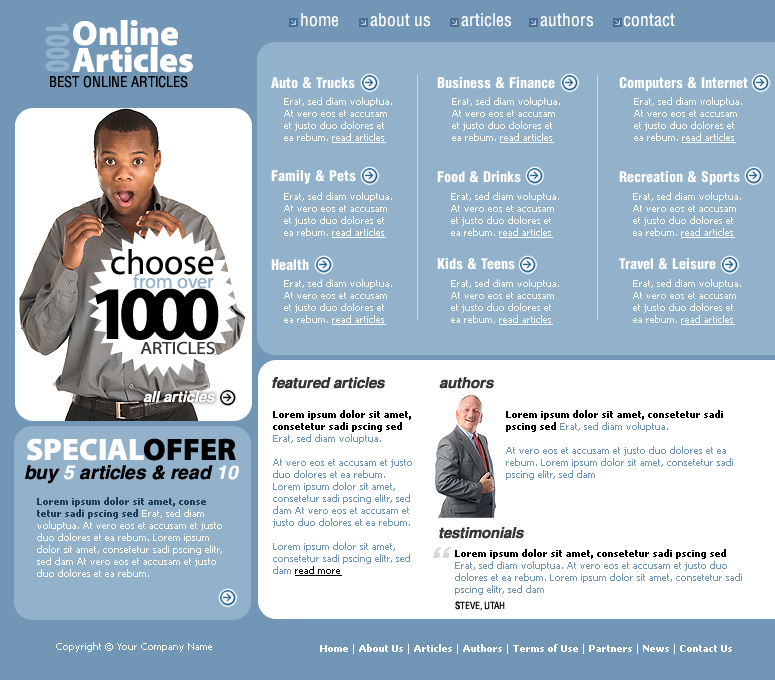
<style>
.page{position:relative;width:775px;height:680px;background:#91b2ca}
.page>*{position:absolute;margin:0}
.t1{font:18px "HeliosCond";color:#ffffff}
.t2{font:35px "MyriadPro-Black";color:#91b2ca;scale:0.63 1}
.t3{font:35px/26.8px "MyriadPro-Black";color:#ffffff}
.t4{font:15px "HeliosCond";color:#000000;text-transform:uppercase}
.t5{font:15px "HeliosCondBlack";color:#ffffff}
.t6{font:10px "Tahoma";color:#ffffff}
.t7{font:10px "Tahoma";color:#ffffff;text-decoration:underline}
.t8{font:35px "MyriadPro-Regular";color:#000000}
.t9{font:20px "MyriadPro-Regular";color:#91b2ca}
.t10{font:76px "MyriadPro-Bold";letter-spacing:-0.16em;color:#000000}
.t11{font:17.7px "MyriadPro-Regular";color:#353535;text-transform:uppercase;scale:1.08 1}
.t12{font:15px "Helvetica-BoldOblique";color:#353535}
.t13{font:15px "Helvetica-BoldOblique";color:#ffffff}
.t14{font:10px "Tahoma";color:#7296b6}
.t15{font:10px "Tahoma-Bold";color:#000000}
.t16{font:10px "Tahoma";color:#000000;text-decoration:underline}
.t17{font:19px "Helvetica-BoldOblique";color:#000000}
.t18{font:19px "Helvetica-BoldOblique";color:#ffffff}
.t19{font:40px "Helvetica-BoldOblique";color:#d7d7d7}
.t20{font:10px "HeliosCond";color:#000000;text-transform:uppercase}
.t21{font:10px "Tahoma-Bold";color:#ffffff}
</style>
<div class="page">
<p class="t1" style="left:301px;top:13px;width:37px;height:14px">home</p>
<p class="t1" style="left:370px;top:13px;width:60px;height:14px">about us</p>
<p class="t1" style="left:461px;top:13px;width:50px;height:14px">articles</p>
<p class="t1" style="left:540px;top:13px;width:53px;height:14px">authors</p>
<p class="t1" style="left:623px;top:13px;width:52px;height:14px">contact</p>
<p class="t2" style="left:45px;top:23px;width:25px;height:49px;rotate:90deg">1000</p>
<p class="t3" style="left:72px;top:20px;width:121px;height:53px">Online<br>Articles</p>
<p class="t4" style="left:50px;top:75px;width:138px;height:13px">best online articles</p>
<p class="t5" style="left:271px;top:77px;width:84px;height:12px">Auto &amp; Trucks</p>
<p class="t5" style="left:437px;top:77px;width:118px;height:12px">Business &amp; Finance</p>
<p class="t5" style="left:619px;top:77px;width:129px;height:14px">Computers &amp; Internet</p>
<p class="t6" style="left:284px;top:97px;width:108px;height:46px">Erat, sed diam voluptua. At vero eos et accusam et justo duo dolores et ea rebum. <span class="t7">read articles</span></p>
<p class="t6" style="left:452px;top:97px;width:108px;height:46px">Erat, sed diam voluptua. At vero eos et accusam et justo duo dolores et ea rebum. <span class="t7">read articles</span></p>
<p class="t6" style="left:634px;top:97px;width:108px;height:46px">Erat, sed diam voluptua. At vero eos et accusam et justo duo dolores et ea rebum. <span class="t7">read articles</span></p>
<p class="t5" style="left:271px;top:170px;width:85px;height:14px">Family &amp; Pets</p>
<p class="t5" style="left:437px;top:171px;width:84px;height:12px">Food &amp; Drinks</p>
<p class="t5" style="left:619px;top:171px;width:121px;height:14px">Recreation &amp; Sports</p>
<p class="t6" style="left:284px;top:192px;width:108px;height:46px">Erat, sed diam voluptua. At vero eos et accusam et justo duo dolores et ea rebum. <span class="t7">read articles</span></p>
<p class="t6" style="left:451px;top:192px;width:108px;height:46px">Erat, sed diam voluptua. At vero eos et accusam et justo duo dolores et ea rebum. <span class="t7">read articles</span></p>
<p class="t6" style="left:633px;top:192px;width:108px;height:46px">Erat, sed diam voluptua. At vero eos et accusam et justo duo dolores et ea rebum. <span class="t7">read articles</span></p>
<p class="t8" style="left:111px;top:249px;width:103px;height:26px">choose</p>
<p class="t5" style="left:271px;top:259px;width:38px;height:12px">Health</p>
<p class="t5" style="left:437px;top:258px;width:78px;height:12px">Kids &amp; Teens</p>
<p class="t5" style="left:619px;top:258px;width:97px;height:12px">Travel &amp; Leisure</p>
<p class="t9" style="left:133px;top:273px;width:81px;height:16px">from over</p>
<p class="t6" style="left:284px;top:279px;width:108px;height:46px">Erat, sed diam voluptua. At vero eos et accusam et justo duo dolores et ea rebum. <span class="t7">read articles</span></p>
<p class="t6" style="left:451px;top:279px;width:108px;height:46px">Erat, sed diam voluptua. At vero eos et accusam et justo duo dolores et ea rebum. <span class="t7">read articles</span></p>
<p class="t6" style="left:633px;top:279px;width:108px;height:46px">Erat, sed diam voluptua. At vero eos et accusam et justo duo dolores et ea rebum. <span class="t7">read articles</span></p>
<p class="t10" style="left:95px;top:288px;width:124px;height:52px">1000</p>
<p class="t11" style="left:140px;top:341px;width:75px;height:14px">articles</p>
<p class="t12" style="left:272px;top:377px;width:113px;height:12px">featured articles</p>
<p class="t12" style="left:439px;top:377px;width:55px;height:12px">authors</p>
<p class="t13" style="left:143px;top:391px;width:72px;height:12px">all articles</p>
<p class="t14" style="left:273px;top:410px;width:139px;height:166px"><span class="t15">Lorem ipsum dolor sit amet, consetetur sadi pscing sed <br></span>Erat, sed diam voluptua. <br><br>At vero eos et accusam et justo duo dolores et ea rebum. Lorem ipsum dolor sit amet, consetetur sadi pscing elitr, sed dam At vero eos et accusam et justo duo dolores et ea rebum. <br><br>Lorem ipsum dolor sit amet, consetetur sadi pscing elitr, sed dam <span class="t16">read more</span></p>
<p class="t14" style="left:506px;top:410px;width:227px;height:70px"><span class="t15">Lorem ipsum dolor sit amet, consetetur sadi pscing sed </span>Erat, sed diam voluptua. <br><br>At vero eos et accusam et justo duo dolores et ea rebum. Lorem ipsum dolor sit amet, consetetur sadi pscing elitr, sed dam</p>
<p class="t17" style="left:25px;top:465px;width:214px;height:19px">buy <span class="t18">5</span> articles &amp; read <span class="t18">10</span></p>
<p class="t12" style="left:439px;top:527px;width:85px;height:12px">testimonials</p>
<p class="t19" style="left:433px;top:546px;width:18px;height:12px">“</p>
<p class="t14" style="left:455px;top:549px;width:287px;height:46px"><span class="t15">Lorem ipsum dolor sit amet, consetetur sadi pscing sed </span>Erat, sed diam voluptua. At vero eos et accusam et justo duo dolores et ea rebum. Lorem ipsum dolor sit amet, consetetur sadi pscing elitr, sed dam</p>
<p class="t20" style="left:455px;top:601px;width:50px;height:10px">steve, utah</p>
<p class="t6" style="left:56px;top:642px;width:156px;height:10px">Copyright © Your Company Name</p>
<p class="t21" style="left:320px;top:644px;width:412px;height:10px"><span class="t6">  </span>Home<span class="t6"> | </span>About Us <span class="t6">| </span>Articles <span class="t6">| </span>Authors <span class="t6">| </span>Terms of Use <span class="t6">| </span>Partners <span class="t6">| </span>News<span class="t6"> | </span>Contact Us</p>
</div>
